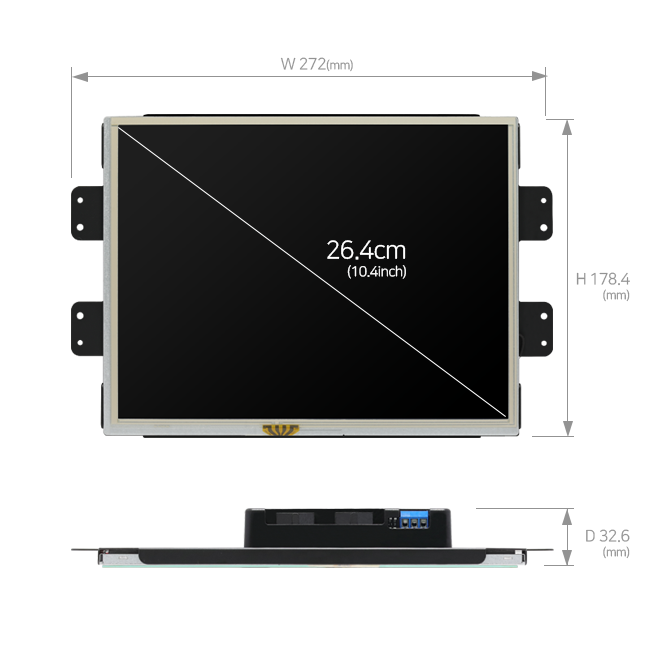
<style>
.page{position:relative;width:650px;height:650px;background:#ffffff}
.page>*{position:absolute;margin:0}
.t1{font:16px "NanumSquareR";letter-spacing:-0.03em;color:#939393}
.t2{font:12px "NanumSquareR";letter-spacing:-0.03em;color:#939393}
.t3{font:14px/18px "NanumSquareR";letter-spacing:-0.03em;color:#ffffff}
.t4{font:25px/18px "NanumSquareR";letter-spacing:-0.03em;color:#ffffff}
.t5{font:16px/15px "NanumSquareR";letter-spacing:-0.03em;color:#939393}
.t6{font:12px/15px "NanumSquareR";letter-spacing:-0.03em;color:#939393}
</style>
<div class="page">
<p class="t1" style="left:280px;top:57px;width:73px;height:15px">W 272<span class="t2">(mm)</span></p>
<p class="t3" style="left:327px;top:240px;width:79px;height:39px;text-align:right"><span class="t4">26.4cm<br></span>(10.4inch)</p>
<p class="t5" style="left:576px;top:272px;width:54px;height:30px;text-align:right">H 178.4<br><span class="t6">(mm)</span></p>
<p class="t5" style="left:586px;top:529px;width:44px;height:30px;text-align:right">D 32.6<br><span class="t6">(mm)</span></p>
</div>
